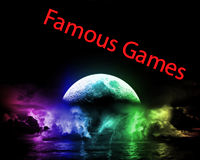
<style>
.page{position:relative;width:200px;height:160px;background:#000000}
.page>*{position:absolute;margin:0}
.t1{font:24px "MyriadPro-Regular";color:#ff181b}
</style>
<div class="page">
<p class="t1" style="left:43px;top:8px;width:143px;height:72px;rotate:22deg">Famous Games</p>
</div>
